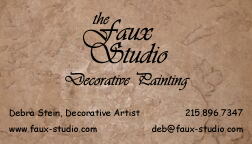
<style>
.page{position:relative;width:252px;height:144px}
.page>*{position:absolute;margin:0}
.t1{font:30px/23px "Vivaldii";color:#000000}
.t2{font:18px/16px "Vivaldii";color:#000000}
.t3{font:30px/16px "Vivaldii";color:#000000}
.t4{font:18px "Vivaldii";color:#000000}
.t5{font:9px/16px "ComicSansMS";color:#000000}
</style>
<div class="page">
<p class="t1" style="left:83px;top:12px;width:86px;height:52px;text-align:right"><span class="t2">the       <br></span><span class="t3">Faux  <br></span>Studio</p>
<p class="t4" style="left:65px;top:71px;width:125px;height:20px">Decorative Painting</p>
<p class="t5" style="left:9px;top:108px;width:131px;height:25px">Debra Stein, Decorative Artist<br>www.faux-studio.com</p>
<p class="t5" style="left:152px;top:109px;width:91px;height:24px;text-align:right">215.896.7347<br>deb@faux-studio.com</p>
</div>
